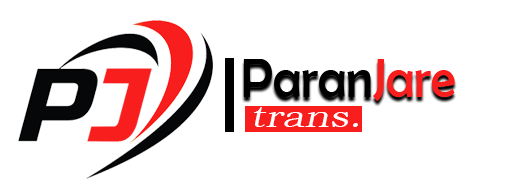
<style>
.page{position:relative;width:512px;height:196px;background:#ffffff}
.page>*{position:absolute;margin:0}
.t1{font:55.5px "BerlinSansFB-Reg";color:#000000;scale:0.92 1}
.t2{font:55.5px "BerlinSansFB-Reg";color:#f91e1e;scale:0.92 1}
.t3{font:32.4px "BookmanOldStyle";color:#ffffff;font-style:italic;scale:1.18 1}
</style>
<div class="page">
<p class="t1" style="left:243px;top:59px;width:212px;height:42px">Paran<span class="t2">Jare</span></p>
<p class="t3" style="left:254px;top:107px;width:104px;height:20px">trans.</p>
</div>
